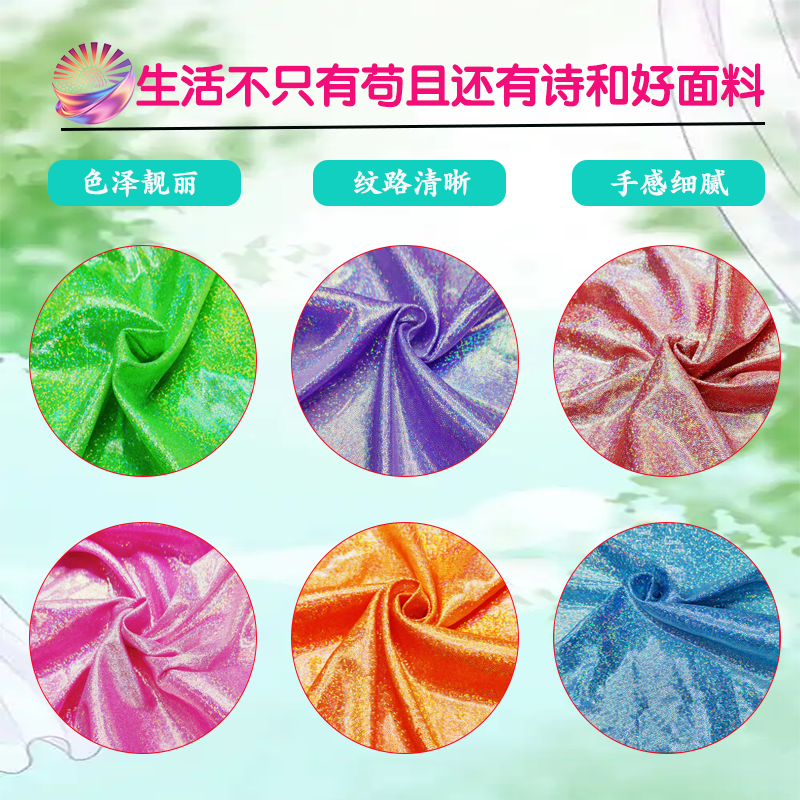
<style>
.page{position:relative;width:800px;height:800px}
.page>*{position:absolute;margin:0}
.t1{font:45px "STYuanti-SC-Bold";color:#f20e79}
.t2{font:30px "STKaitiSC-Black";color:#f5f7fa}
</style>
<div class="page">
<p class="t1" style="left:136px;top:63px;width:629px;height:45px">生活不只有苟且还有诗和好面料</p>
<p class="t2" style="left:84px;top:168px;width:114px;height:30px">色泽靓丽</p>
<p class="t2" style="left:354px;top:168px;width:117px;height:29px">纹路清晰</p>
<p class="t2" style="left:610px;top:169px;width:119px;height:28px">手感细腻</p>
</div>
